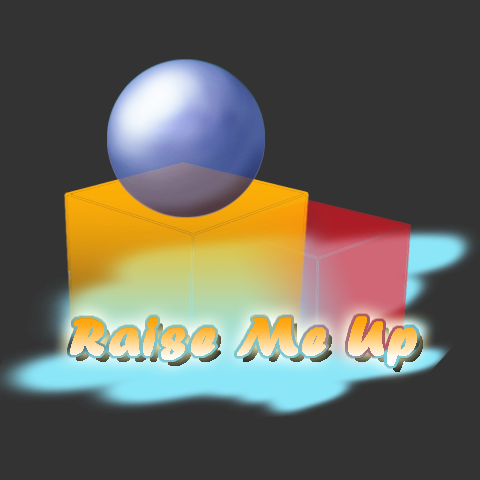
<style>
.page{position:relative;width:480px;height:480px;background:#333333}
.page>*{position:absolute;margin:0}
.t1{font:55.4px "ForteMT";font-weight:bold}
</style>
<div class="page">
<p class="t1" style="left:70px;top:316px;width:347px;height:49px">Raise Me Up</p>
<p class="t1" style="left:70px;top:317px;width:347px;height:49px">Raise Me Up</p>
</div>
